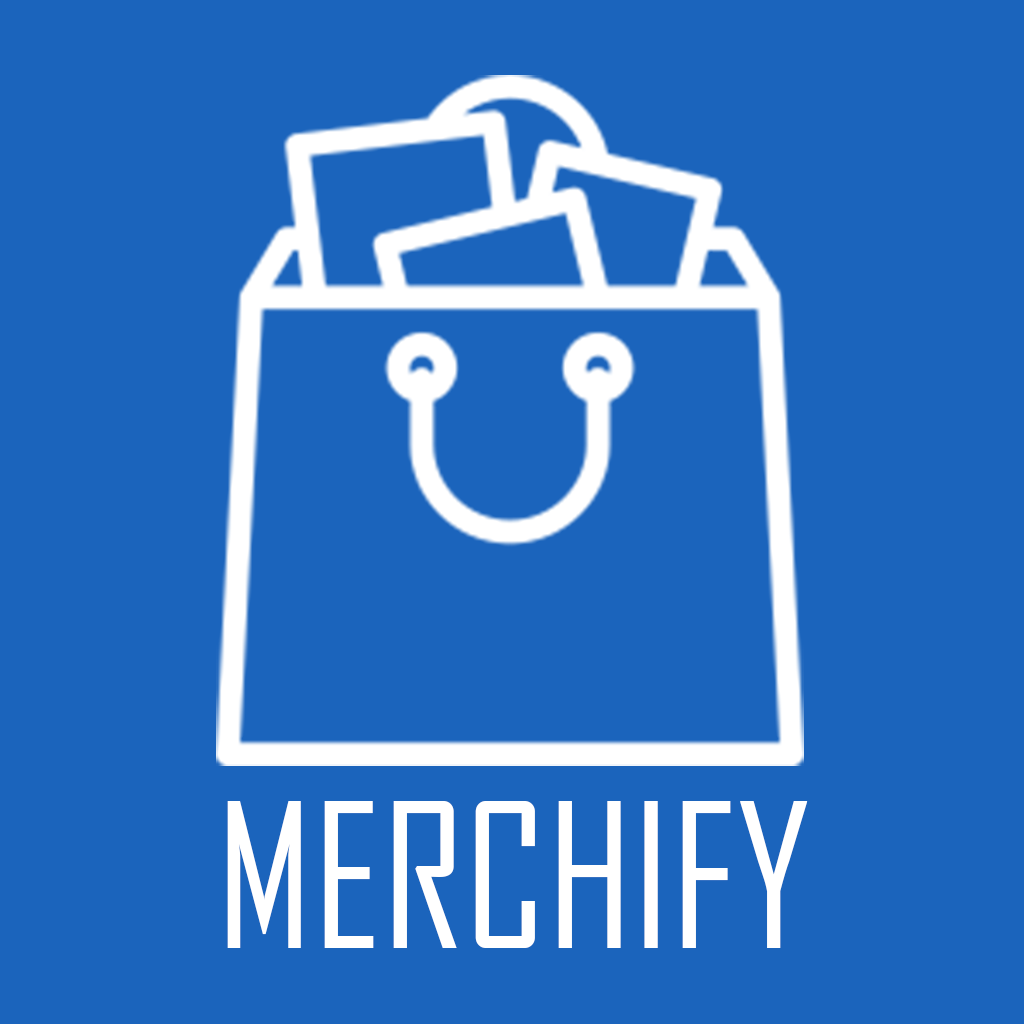
<style>
.page{position:relative;width:1024px;height:1024px;background:#1b64bc}
.page>*{position:absolute;margin:0}
.t1{font:193.5px "AgencyFB-Reg";color:#ffffff}
</style>
<div class="page">
<p class="t1" style="left:227px;top:801px;width:581px;height:147px">MERCHIFY</p>
</div>
